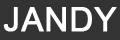
<style>
.page{position:relative;width:120px;height:40px;background:#333333}
.page>*{position:absolute;margin:0}
.t1{font:33.3px "ArialMT";color:#ffffff;font-weight:bold}
</style>
<div class="page">
<p class="t1" style="left:3px;top:7px;width:114px;height:25px">JANDY</p>
</div>
